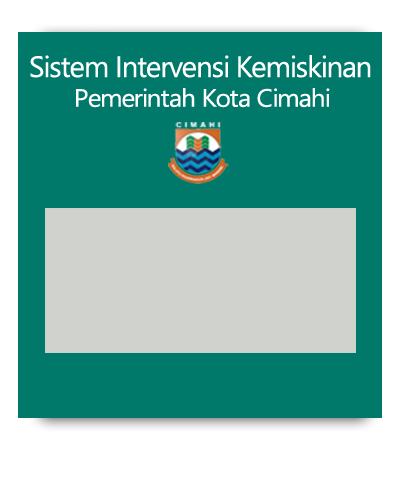
<style>
.page{position:relative;width:400px;height:500px;background:#00796b}
.page>*{position:absolute;margin:0}
.t1{font:29.5px "SegoeUI";letter-spacing:-0.04em;color:#ffffff}
.t2{font:25px "SegoeUI";letter-spacing:-0.04em;color:#ffffff;scale:1.06 1}
</style>
<div class="page">
<p class="t1" style="left:30px;top:55px;width:341px;height:23px">Sistem Intervensi Kemiskinan</p>
<p class="t2" style="left:76px;top:88px;width:254px;height:20px">Pemerintah Kota Cimahi</p>
</div>
